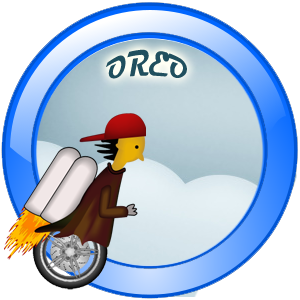
<style>
.page{position:relative;width:300px;height:300px;background:#ffffff}
.page>*{position:absolute;margin:0}
.t1{font:24px "Magneto-Bold";color:#204f5e}
</style>
<div class="page">
<p class="t1" style="left:106px;top:49px;width:81px;height:30px">OREO</p>
</div>
